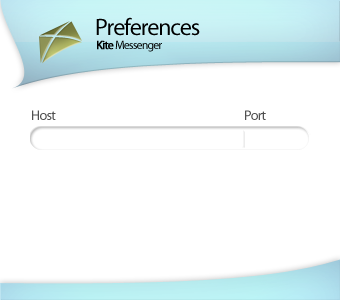
<style>
.page{position:relative;width:340px;height:300px;background:#ffffff}
.page>*{position:absolute;margin:0}
.t1{font:24px "MyriadPro-Regular";letter-spacing:-0.05em;color:#000000}
.t2{font:12px "MyriadPro-Regular";letter-spacing:-0.075em;color:#000000}
.t3{font:12px "MyriadPro-Regular";letter-spacing:-0.075em;color:#000000;font-weight:bold}
.t4{font:14px "MyriadPro-Regular";letter-spacing:-0.05em;color:#505050}
</style>
<div class="page">
<p class="t1" style="left:96px;top:17px;width:104px;height:19px">Preferences</p>
<p class="t2" style="left:97px;top:40px;width:65px;height:12px"><span class="t3">Kite </span>Messenger</p>
<p class="t4" style="left:32px;top:110px;width:24px;height:10px">Host</p>
<p class="t4" style="left:245px;top:110px;width:21px;height:10px">Port</p>
</div>
